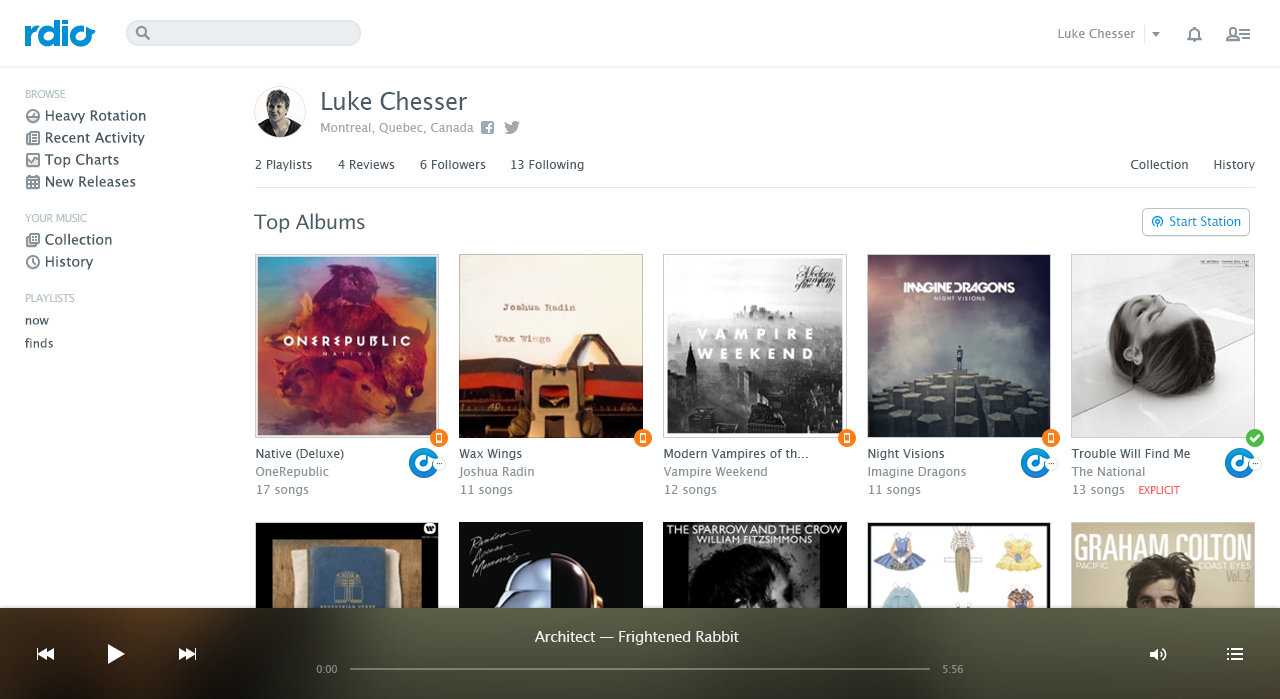
<style>
.page{position:relative;width:1280px;height:699px;background:#ffffff}
.page>*{position:absolute;margin:0}
.t1{font:12px "LucidaGrande";color:#89949b}
.t2{font:11px "LucidaGrande";letter-spacing:-0.05em;color:#b8c3c9;text-transform:uppercase}
.t3{font:24px "LucidaGrande";letter-spacing:-0.03em;color:#4b5c66}
.t4{font:14px "LucidaGrande";color:#4b5c66}
.t5{font:12px "LucidaGrande";color:#a0aab1}
.t6{font:12px "LucidaGrande";color:#4b5c66}
.t7{font:20px "LucidaGrande";letter-spacing:-0.03em;color:#4b5c66}
.t8{font:13px "LucidaGrande";letter-spacing:-0.03em;color:#008fd5}
.t9{font:6px "LucidaGrande";color:#4b5c66}
.t10{font:10px "LucidaGrande";color:#ff5d5d}
.t11{font:15px "LucidaGrande";letter-spacing:-0.035em;color:#ffffff}
.t12{font:10px "LucidaGrande";letter-spacing:-0.03em;color:#83837f}
.t13{font:10px "LucidaGrande";letter-spacing:-0.03em;color:#8a8b84}
</style>
<div class="page">
<p class="t1" style="left:1058px;top:29px;width:77px;height:9px">Luke Chesser</p>
<p class="t2" style="left:25px;top:90px;width:41px;height:8px">Browse</p>
<p class="t3" style="left:322px;top:91px;width:145px;height:19px">Luke Chesser</p>
<p class="t4" style="left:46px;top:110px;width:100px;height:14px">Heavy Rotation</p>
<p class="t5" style="left:321px;top:123px;width:153px;height:11px">Montreal, Quebec, Canada</p>
<p class="t4" style="left:46px;top:132px;width:99px;height:14px">Recent Activity</p>
<p class="t4" style="left:44px;top:153px;width:75px;height:15px">Top Charts</p>
<p class="t6" style="left:255px;top:160px;width:57px;height:11px">2 Playlists</p>
<p class="t6" style="left:338px;top:160px;width:57px;height:9px">4 Reviews</p>
<p class="t6" style="left:420px;top:160px;width:66px;height:9px">6 Followers</p>
<p class="t6" style="left:511px;top:160px;width:73px;height:11px">13 Following</p>
<p class="t6" style="left:1131px;top:160px;width:57px;height:9px">Collection</p>
<p class="t6" style="left:1214px;top:160px;width:41px;height:11px">History</p>
<p class="t4" style="left:46px;top:175px;width:90px;height:12px">New Releases</p>
<p class="t2" style="left:25px;top:214px;width:62px;height:8px">Your Music</p>
<p class="t7" style="left:254px;top:213px;width:111px;height:20px">Top Albums</p>
<p class="t8" style="left:1170px;top:216px;width:71px;height:10px">Start Station</p>
<p class="t4" style="left:45px;top:233px;width:67px;height:12px">Collection</p>
<p class="t4" style="left:46px;top:256px;width:48px;height:14px">History</p>
<p class="t2" style="left:25px;top:294px;width:50px;height:8px">Playlists</p>
<p class="t6" style="left:25px;top:318px;width:24px;height:7px">now</p>
<p class="t6" style="left:25px;top:338px;width:28px;height:10px">finds</p>
<p class="t6" style="left:256px;top:449px;width:88px;height:11px">Native (Deluxe)</p>
<p class="t6" style="left:459px;top:449px;width:63px;height:11px">Wax Wings</p>
<p class="t6" style="left:664px;top:449px;width:144px;height:11px">Modern Vampires of th...</p>
<p class="t6" style="left:868px;top:449px;width:77px;height:11px">Night Visions</p>
<p class="t6" style="left:1071px;top:449px;width:119px;height:9px">Trouble Will Find Me</p>
<p class="t1" style="left:256px;top:467px;width:73px;height:11px">OneRepublic</p>
<p class="t9" style="left:436px;top:463px;width:6px;height:2px">...</p>
<p class="t1" style="left:458px;top:467px;width:76px;height:11px">Joshua Radin</p>
<p class="t1" style="left:663px;top:467px;width:104px;height:11px">Vampire Weekend</p>
<p class="t1" style="left:868px;top:467px;width:98px;height:11px">Imagine Dragons</p>
<p class="t9" style="left:1048px;top:463px;width:6px;height:2px">...</p>
<p class="t1" style="left:1071px;top:467px;width:74px;height:9px">The National</p>
<p class="t9" style="left:1252px;top:463px;width:6px;height:2px">...</p>
<p class="t1" style="left:257px;top:485px;width:52px;height:11px">17 songs</p>
<p class="t1" style="left:461px;top:485px;width:52px;height:11px">11 songs</p>
<p class="t1" style="left:665px;top:485px;width:52px;height:11px">12 songs</p>
<p class="t1" style="left:869px;top:485px;width:52px;height:11px">11 songs</p>
<p class="t1" style="left:1073px;top:485px;width:52px;height:11px">13 songs</p>
<p class="t10" style="left:1139px;top:486px;width:42px;height:8px">EXPLICIT</p>
<p class="t11" style="left:535px;top:631px;width:204px;height:14px;opacity:0.9">Architect — Frightened Rabbit</p>
<p class="t12" style="left:316px;top:665px;width:21px;height:8px">0:00</p>
<p class="t13" style="left:943px;top:665px;width:20px;height:8px">5:56</p>
</div>
